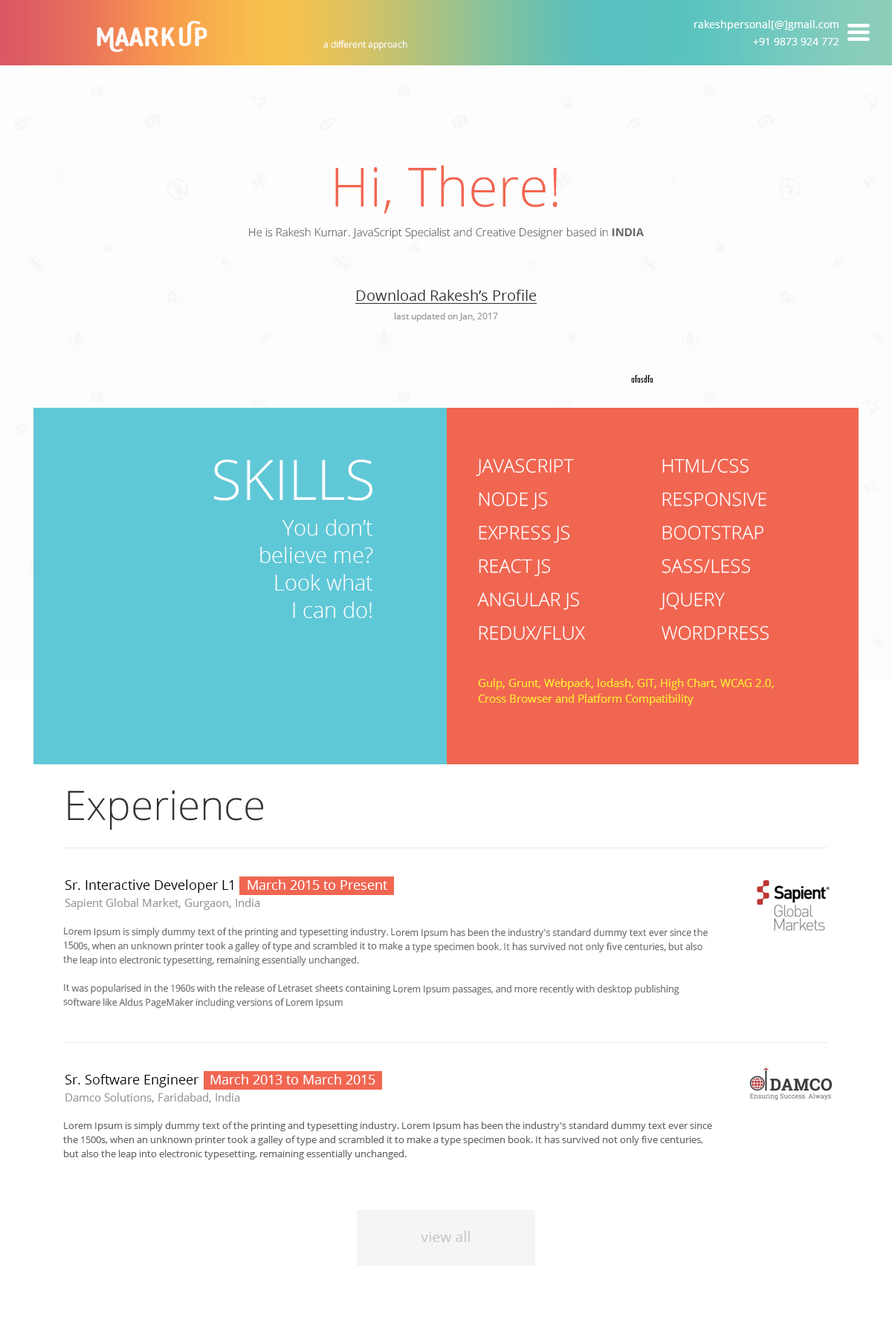
<style>
.page{position:relative;width:892px;height:1337px;background:#ffffff}
.page>*{position:absolute;margin:0}
.t1{font:26px "SwistblnkMonthoers";color:#ffffff;scale:1.59 1}
.t2{font:10.4px/17.1px "OpenSans";color:#ffffff}
.t3{font:8.9px "OpenSans-Light";letter-spacing:0.02em;color:#ffffff}
.t4{font:54.2px "OpenSans-Light";color:#f26651}
.t5{font:11.1px "OpenSans-Light";color:#666666}
.t6{font:11.1px "OpenSans-Bold";color:#666666}
.t7{font:14.9px "OpenSans";color:#313536;text-decoration:underline}
.t8{font:8.9px/18.6px "OpenSans";color:#929393}
.t9{font:8.8px "Futura-CondensedMedium";color:#000000}
.t10{font:55.7px "OpenSans-Light";color:#ffffff}
.t11{font:18.6px/33.4px "OpenSans-Light";color:#ffffff}
.t12{font:21.5px/27.5px "OpenSans-Light";color:#ffffff}
.t13{font:11.1px/15.6px "OpenSans";color:#ffea33}
.t14{font:40.9px "OpenSans-Light";color:#313536}
.t15{font:13.4px "OpenSans";color:#000000}
.t16{font:13.4px "OpenSans";color:#ffffff}
.t17{font:11.1px "OpenSans";color:#989898}
.t18{font:9.7px/14.1px "OpenSans";color:#646464;scale:0.97 1}
.t19{font:9.7px/14.1px "OpenSans";color:#646464}
.t20{font:14.1px "OpenSans";color:#c2c2c2}
</style>
<div class="page">
<p class="t1" style="left:97px;top:21px;width:110px;height:31px">MaarkUP</p>
<p class="t2" style="left:694px;top:20px;width:145px;height:25px;text-align:right">rakeshpersonal[@]gmail.com<br>+91 9873 924 772</p>
<p class="t3" style="left:323px;top:40px;width:84px;height:11px">a different approach</p>
<p class="t4" style="left:335px;top:165px;width:222px;height:49px">Hi, There!</p>
<p class="t5" style="left:249px;top:227px;width:394px;height:12px">He is Rakesh Kumar. JavaScript Specialist and Creative Designer based in <span class="t6">INDIA</span></p>
<p class="t7" style="left:355px;top:290px;width:181px;height:32px;text-align:center">Download Rakesh’s Profile<br><span class="t8">last updated on Jan, 2017</span></p>
<p class="t9" style="left:631px;top:374px;width:22px;height:9px">afasdfa</p>
<p class="t10" style="left:214px;top:459px;width:158px;height:42px">SKILLS</p>
<p class="t11" style="left:476px;top:458px;width:109px;height:182px">JAVASCRIPT<br>NODE JS<br>EXPRESS JS<br>REACT JS<br>ANGULAR JS<br>REDUX/FLUX</p>
<p class="t11" style="left:659px;top:458px;width:109px;height:182px">HTML/CSS<br>RESPONSIVE<br>BOOTSTRAP<br>SASS/LESS<br>JQUERY<br>WORDPRESS</p>
<p class="t12" style="left:260px;top:519px;width:113px;height:99px;text-align:right">You don’t<br>believe me?<br>Look what<br>I can do!</p>
<p class="t13" style="left:478px;top:678px;width:295px;height:28px">Gulp, Grunt, Webpack, lodash, GIT, High Chart, WCAG 2.0,<br>Cross Browser and Platform Compatibility</p>
<p class="t14" style="left:68px;top:791px;width:195px;height:40px">Experience</p>
<p class="t15" style="left:65px;top:880px;width:323px;height:13px">Sr. Interactive Developer L1   <span class="t16">March 2015 to Present</span></p>
<p class="t17" style="left:65px;top:898px;width:195px;height:12px">Sapient Global Market, Gurgaon, India</p>
<p class="t18" style="left:63px;top:927px;width:644px;height:82px">Lorem Ipsum is simply dummy text of the printing and typesetting industry. Lorem Ipsum has been the industry's standard dummy text ever since the 1500s, when an unknown printer took a galley of type and scrambled it to make a type specimen book. It has survived not only five centuries, but also the leap into electronic typesetting, remaining essentially unchanged.<br><br>It was popularised in the 1960s with the release of Letraset sheets containing Lorem Ipsum passages, and more recently with desktop publishing software like Aldus PageMaker including versions of Lorem Ipsum</p>
<p class="t16" style="left:65px;top:1074px;width:310px;height:14px"><span class="t15">Sr. Software Engineer   </span>March 2013 to March 2015</p>
<p class="t17" style="left:65px;top:1093px;width:175px;height:10px">Damco Solutions, Faridabad, India</p>
<p class="t19" style="left:63px;top:1122px;width:649px;height:38px">Lorem Ipsum is simply dummy text of the printing and typesetting industry. Lorem Ipsum has been the industry's standard dummy text ever since the 1500s, when an unknown printer took a galley of type and scrambled it to make a type specimen book. It has survived not only five centuries, but also the leap into electronic typesetting, remaining essentially unchanged.<br><br>It was popularised in the 1960s with the release of Letraset sheets containing Lorem Ipsum passages, and more recently with desktop publishing software like Aldus PageMaker including versions of Lorem Ipsum</p>
<p class="t20" style="left:421px;top:1231px;width:49px;height:11px">view all</p>
</div>
